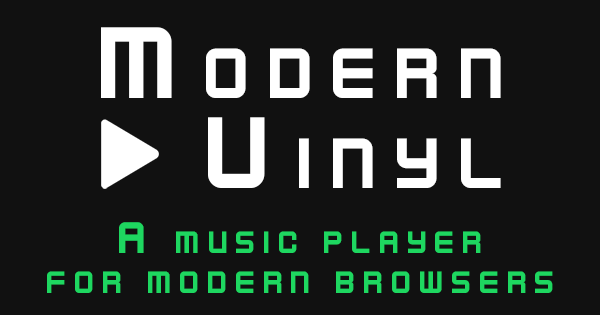
<style>
.page{position:relative;width:600px;height:315px;background:#111111}
.page>*{position:absolute;margin:0}
.t1{font:112.9px/90.5px "KenVector-Future-Thin";letter-spacing:0.1em;color:#ffffff;font-variant:small-caps}
.t2{font:49.2px/39.5px "KenVector-Future-Thin";letter-spacing:0.1em;color:#1ed760;font-variant:small-caps}
</style>
<div class="page">
<p class="t1" style="left:101px;top:27px;width:400px;height:161px;text-align:right">Modern<br>Vinyl</p>
<p class="t2" style="left:47px;top:222px;width:506px;height:71px;text-align:center">A music player<br>for modern browsers</p>
</div>
